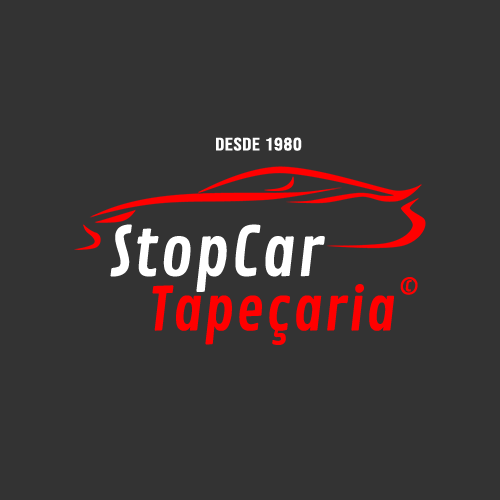
<style>
.page{position:relative;width:500px;height:500px;background:#333333}
.page>*{position:absolute;margin:0}
.t1{font:17.8px "BebasNeue-Regular";letter-spacing:0.025em;color:#ffffff;scale:1.25 1}
.t2{font:67px "ContrailOne-Regular";letter-spacing:0.025em;color:#ffffff}
.t3{font:21.2px "ContrailOne-Regular";letter-spacing:0.025em;color:#ff0000}
.t4{font:58.7px "ContrailOne-Regular";letter-spacing:0.025em;color:#ff0000}
</style>
<div class="page">
<p class="t1" style="left:216px;top:137px;width:86px;height:14px">desde 1980</p>
<p class="t2" style="left:110px;top:224px;width:215px;height:68px">StopCar</p>
<p class="t3" style="left:400px;top:277px;width:18px;height:18px">©</p>
<p class="t4" style="left:152px;top:284px;width:243px;height:61px">Tapeçaria</p>
</div>
